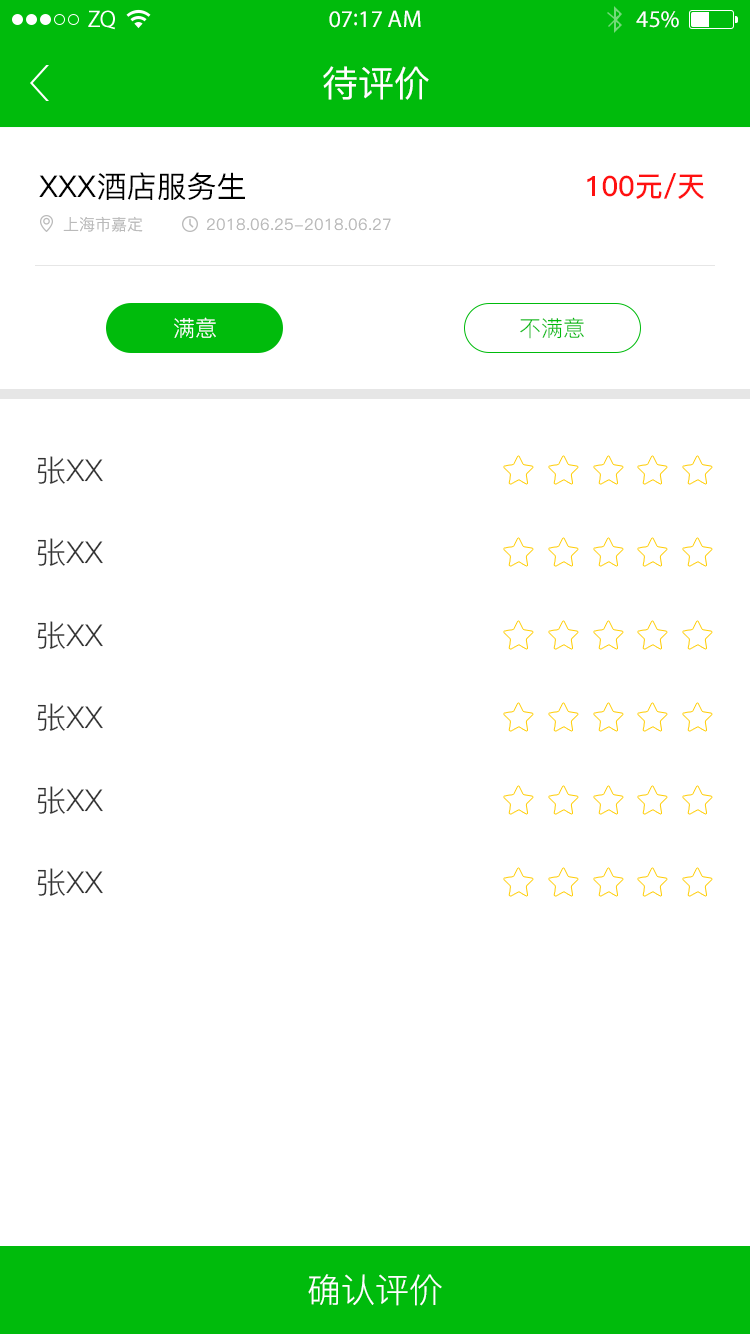
<style>
.page{position:relative;width:750px;height:1334px;background:#ffffff}
.page>*{position:absolute;margin:0}
.t1{font:24px "MyriadPro-Regular";color:#ffffff}
.t2{font:36px "PingFang-SC-Medium";color:#ffffff}
.t3{font:30px "PingFang-SC-Medium";color:#000000}
.t4{font:28px "PingFang-SC-Bold";color:#ff1010}
.t5{font:16px "PingFang-SC-Medium";color:#bababa}
.t6{font:22px "PingFang-SC-Regular";color:#ffffff}
.t7{font:22px "PingFang-SC-Regular";color:#00bb0c}
.t8{font:30px "PingFang-SC-Regular";color:#333333}
.t9{font:34px "PingFang-SC-Regular";color:#ffffff}
</style>
<div class="page">
<p class="t1" style="left:329px;top:10px;width:92px;height:18px">07:17 AM</p>
<p class="t1" style="left:636px;top:11px;width:43px;height:17px">45%</p>
<p class="t2" style="left:323px;top:66px;width:106px;height:34px">待评价</p>
<p class="t3" style="left:39px;top:172px;width:206px;height:28px">XXX酒店服务生</p>
<p class="t4" style="left:587px;top:173px;width:117px;height:26px">100元/天</p>
<p class="t5" style="left:63px;top:216px;width:80px;height:16px">上海市嘉定</p>
<p class="t5" style="left:207px;top:218px;width:184px;height:13px">2018.06.25-2018.06.27</p>
<p class="t6" style="left:174px;top:317px;width:42px;height:22px">满意</p>
<p class="t7" style="left:520px;top:317px;width:64px;height:22px">不满意</p>
<p class="t8" style="left:37px;top:456px;width:66px;height:28px">张XX</p>
<p class="t8" style="left:37px;top:538px;width:66px;height:28px">张XX</p>
<p class="t8" style="left:37px;top:621px;width:66px;height:28px">张XX</p>
<p class="t8" style="left:37px;top:703px;width:66px;height:28px">张XX</p>
<p class="t8" style="left:37px;top:786px;width:66px;height:28px">张XX</p>
<p class="t8" style="left:37px;top:868px;width:66px;height:28px">张XX</p>
<p class="t9" style="left:308px;top:1274px;width:134px;height:32px">确认评价</p>
</div>
